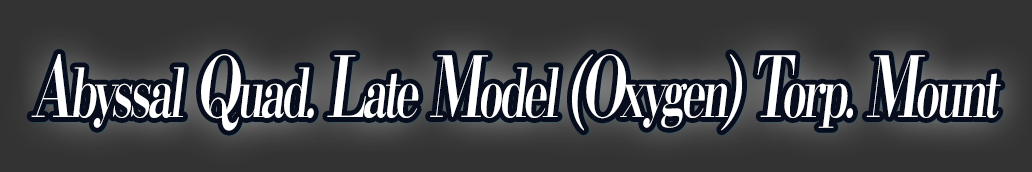
<style>
.page{position:relative;width:1032px;height:172px;background:#333333}
.page>*{position:absolute;margin:0}
.t1{font:67.2px "KochoStd-Heavy";letter-spacing:-0.08em;color:#ffffff;font-style:italic;scale:0.67 1}
.t2{font:84px "KochoStd-Heavy";letter-spacing:-0.08em;color:#ffffff;font-style:italic;scale:0.67 1}
</style>
<div class="page">
<p class="t1" style="left:31px;top:54px;width:970px;height:77px"><span class="t2">A</span>byssal<span class="t2"> Q</span>uad.<span class="t2"> L</span>ate<span class="t2"> M</span>odel <span class="t2">(O</span>xygen<span class="t2">) T</span>orp.<span class="t2"> M</span>ount</p>
</div>
